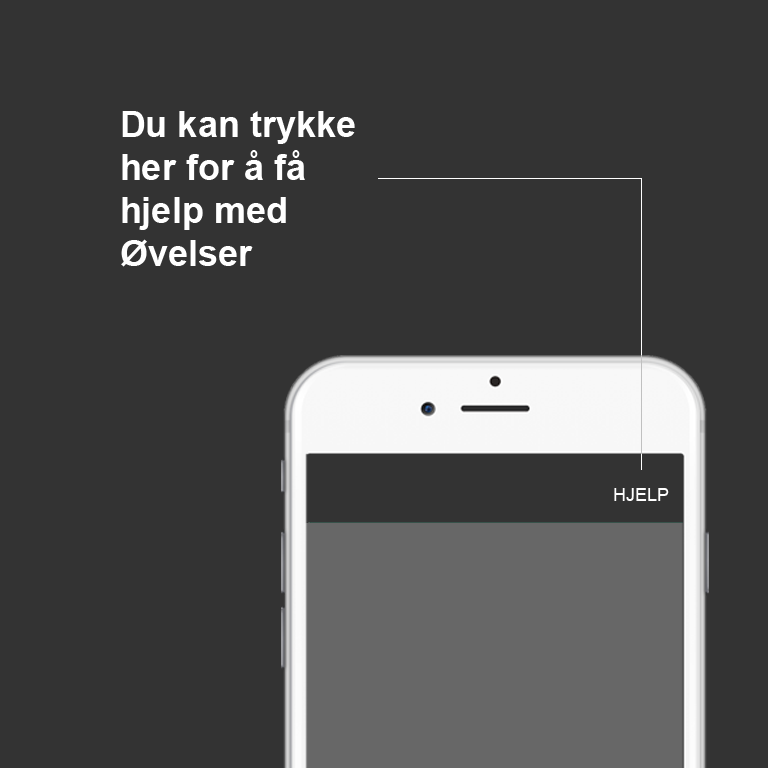
<style>
.page{position:relative;width:768px;height:768px;background:#333333}
.page>*{position:absolute;margin:0}
.t1{font:36px "Arial-BoldMT";color:#ffffff}
.t2{font:18px "ArialMT";color:#ffffff}
</style>
<div class="page">
<p class="t1" style="left:121px;top:111px;width:234px;height:156px">Du kan trykke her for å få hjelp med <br>Øvelser</p>
<p class="t2" style="left:614px;top:488px;width:55px;height:13px">HJELP</p>
</div>
